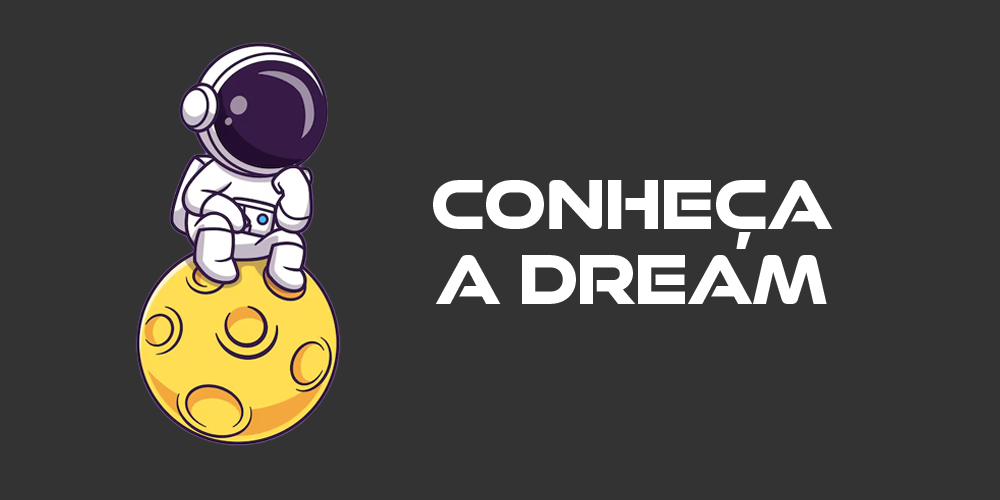
<style>
.page{position:relative;width:1000px;height:500px;background:#333333}
.page>*{position:absolute;margin:0}
.t1{font:75px/75px "GoodTimingRg-Bold";letter-spacing:-0.025em;color:#ffffff}
</style>
<div class="page">
<p class="t1" style="left:433px;top:180px;width:400px;height:124px;text-align:center">CONHEÇA<br>A DREAM</p>
</div>
